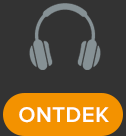
<style>
.page{position:relative;width:126px;height:136px;background:#333333}
.page>*{position:absolute;margin:0}
.t1{font:22px "ProximaNova-Semibold";letter-spacing:0.025em;color:#ffffff}
</style>
<div class="page">
<p class="t1" style="left:19px;top:107px;width:90px;height:16px">ONTDEK</p>
</div>
